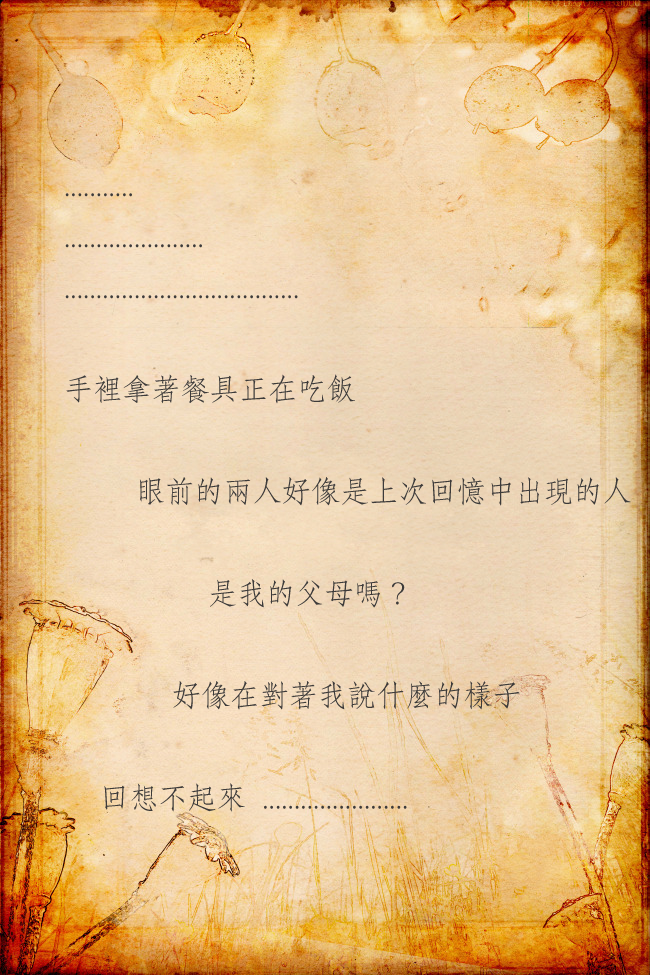
<style>
.page{position:relative;width:650px;height:975px}
.page>*{position:absolute;margin:0}
.t1{font:29.2px "AdobeFangsongStd-Regular";color:#3d3b3a}
</style>
<div class="page">
<p class="t1" style="left:65px;top:193px;width:566px;height:619px">...........<br>......................<br>.....................................<br><br>手裡拿著餐具正在吃飯<br><br>  眼前的兩人好像是上次回憶中出現的人<br><br>    是我的父母嗎 ?<br><br>   好像在對著我說什麼的樣子<br><br> 回想不起來  .......................</p>
</div>
